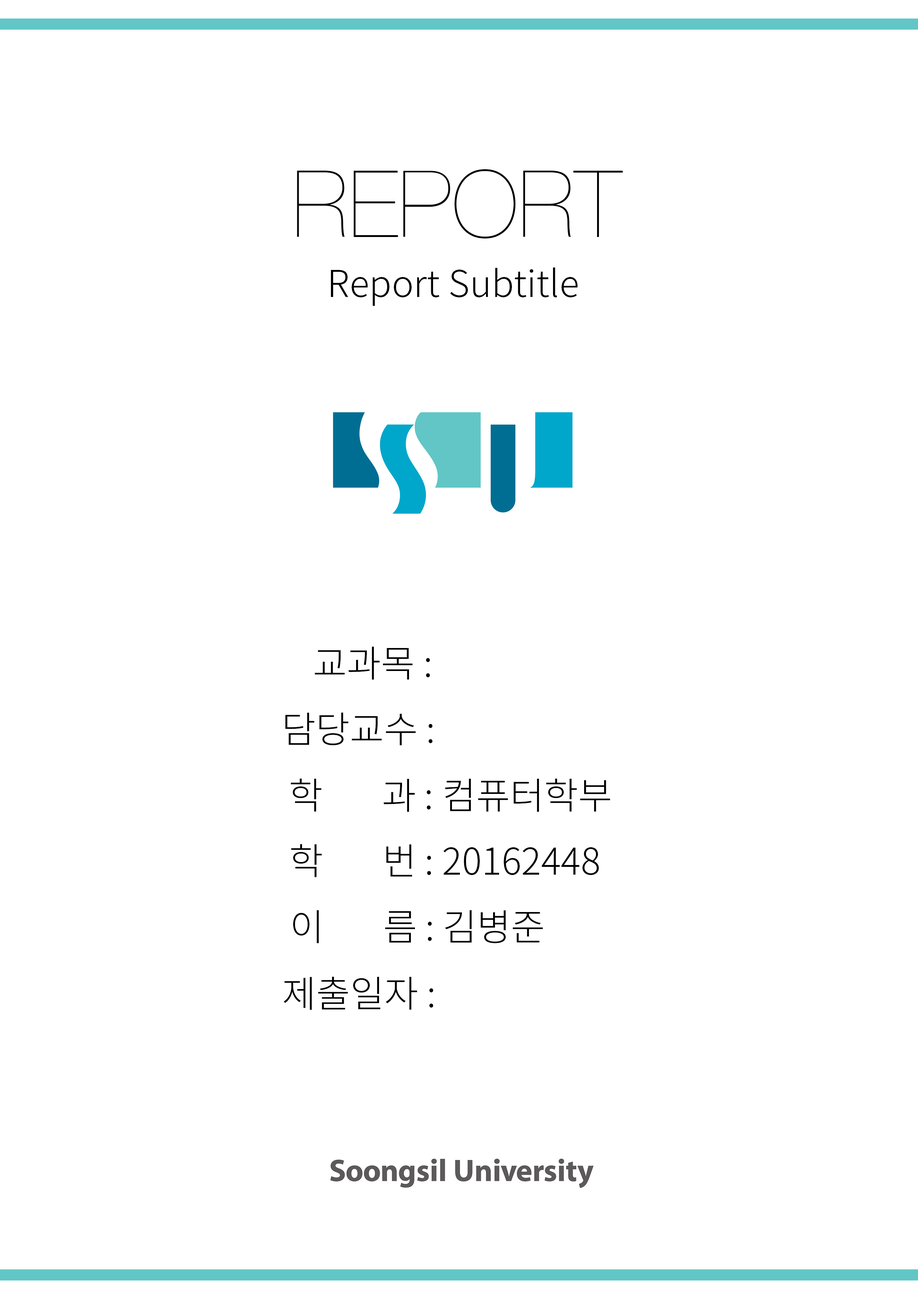
<style>
.page{position:relative;width:918px;height:1299px;background:#ffffff}
.page>*{position:absolute;margin:0}
.t1{font:37px "NotoSansCJKkr-Light";color:#000000}
</style>
<div class="page">
<p class="t1" style="left:331px;top:267px;width:247px;height:39px">Report Subtitle</p>
<p class="t1" style="left:315px;top:646px;width:115px;height:34px">교과목 :</p>
<p class="t1" style="left:285px;top:712px;width:148px;height:33px">담당교수 :</p>
<p class="t1" style="left:291px;top:778px;width:319px;height:34px">학     과 : 컴퓨터학부</p>
<p class="t1" style="left:291px;top:844px;width:308px;height:33px">학     번 : 20162448</p>
<p class="t1" style="left:293px;top:910px;width:250px;height:33px">이      름 : 김병준</p>
<p class="t1" style="left:284px;top:976px;width:150px;height:34px">제출일자 :</p>
</div>
